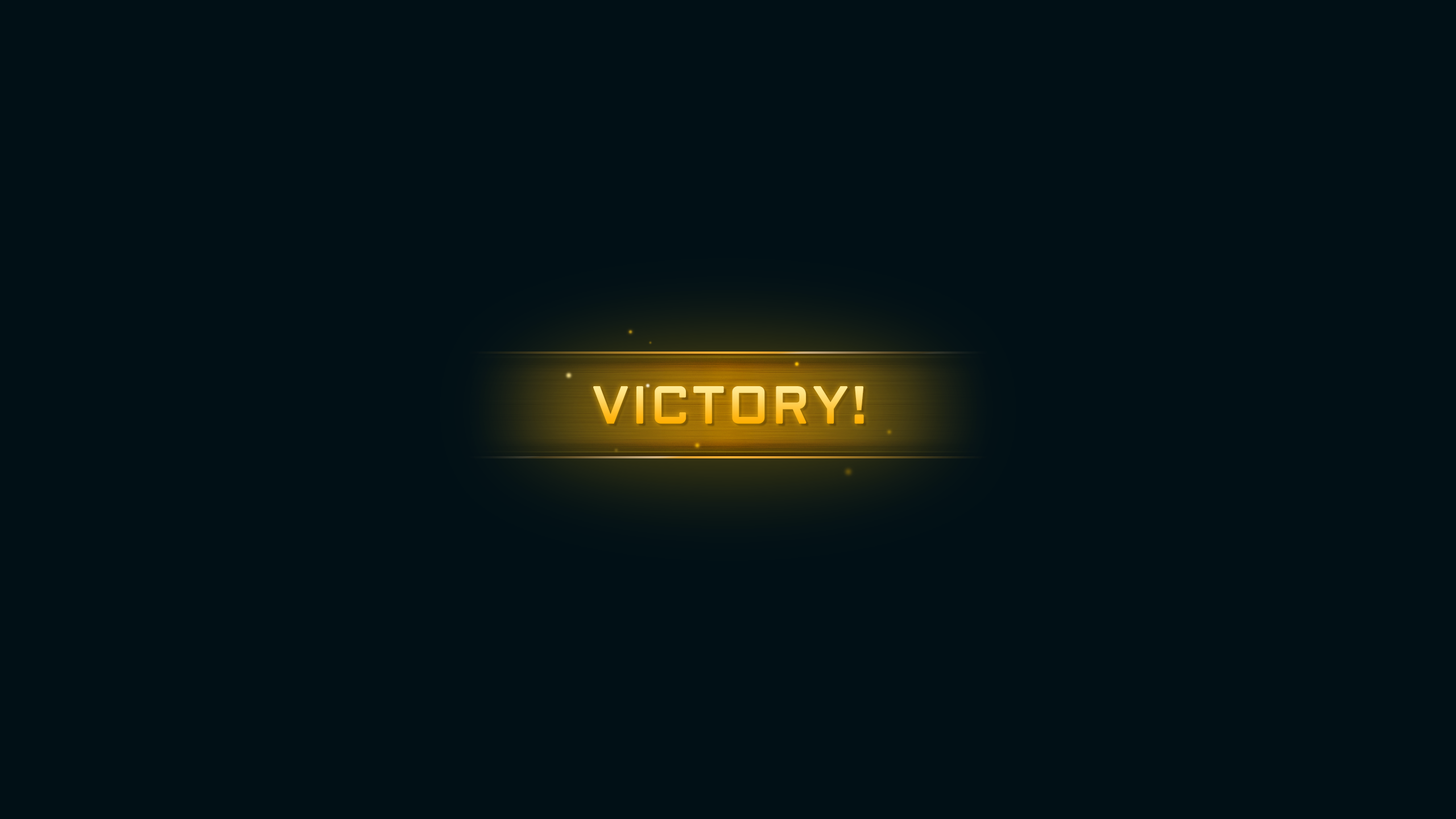
<style>
.page{position:relative;width:1456px;height:819px;background:#011016}
.page>*{position:absolute;margin:0}
.t1{font:51.2px "Aldrich";letter-spacing:0.05em;font-weight:bold}
</style>
<div class="page">
<p class="t1" style="left:593px;top:386px;width:271px;height:38px">VICTORY!</p>
</div>
